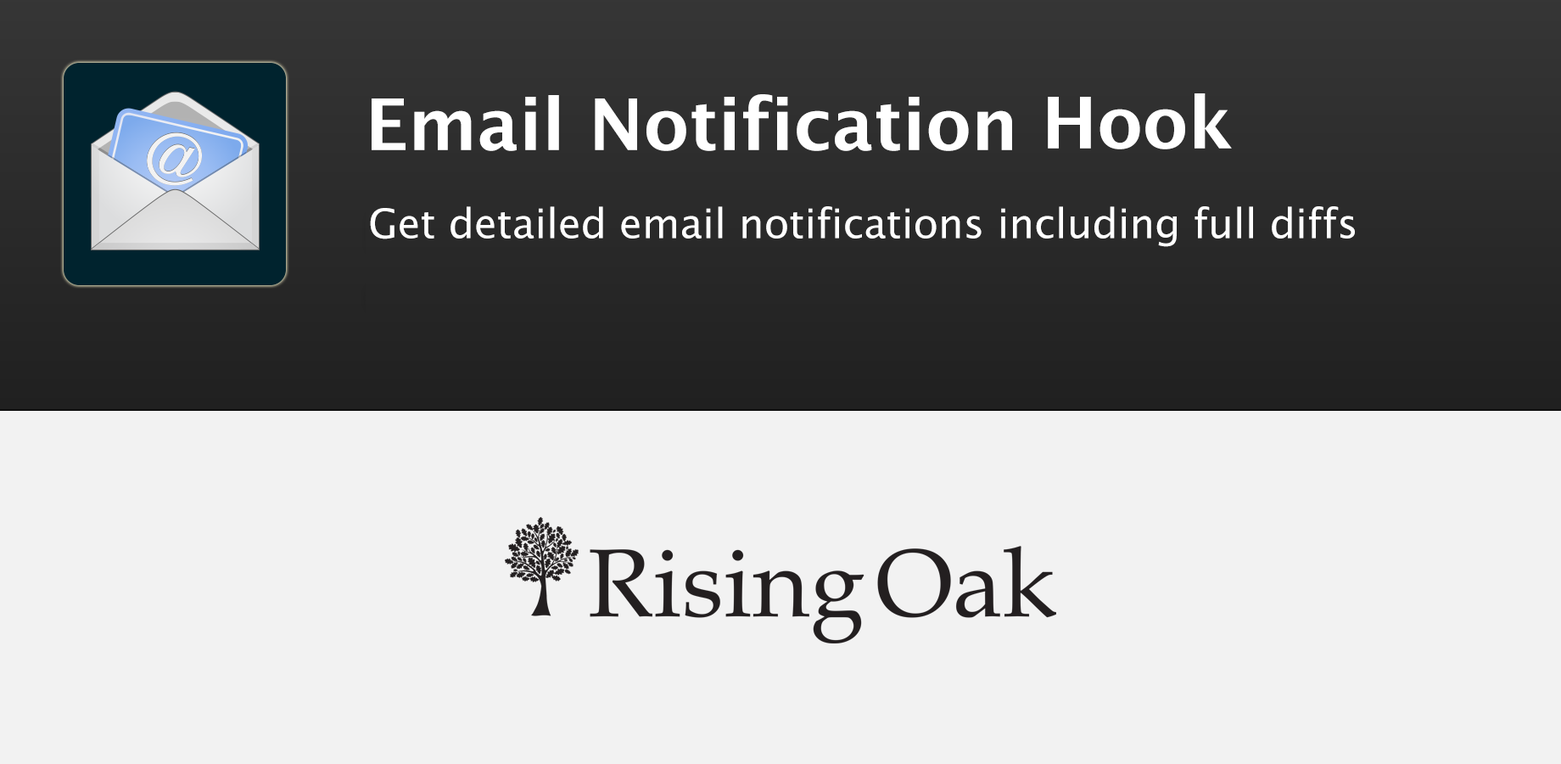
<style>
.page{position:relative;width:1561px;height:764px;background:#f2f2f2}
.page>*{position:absolute;margin:0}
.t1{font:71.3px "LucidaGrande-Bold";color:#ffffff}
.t2{font:40.7px "LucidaGrande";color:#ffffff}
</style>
<div class="page">
<p class="t1" style="left:372px;top:93px;width:860px;height:58px">Email Notification Hook</p>
<p class="t2" style="left:370px;top:206px;width:985px;height:41px">Get detailed email notifications including full diffs</p>
</div>
